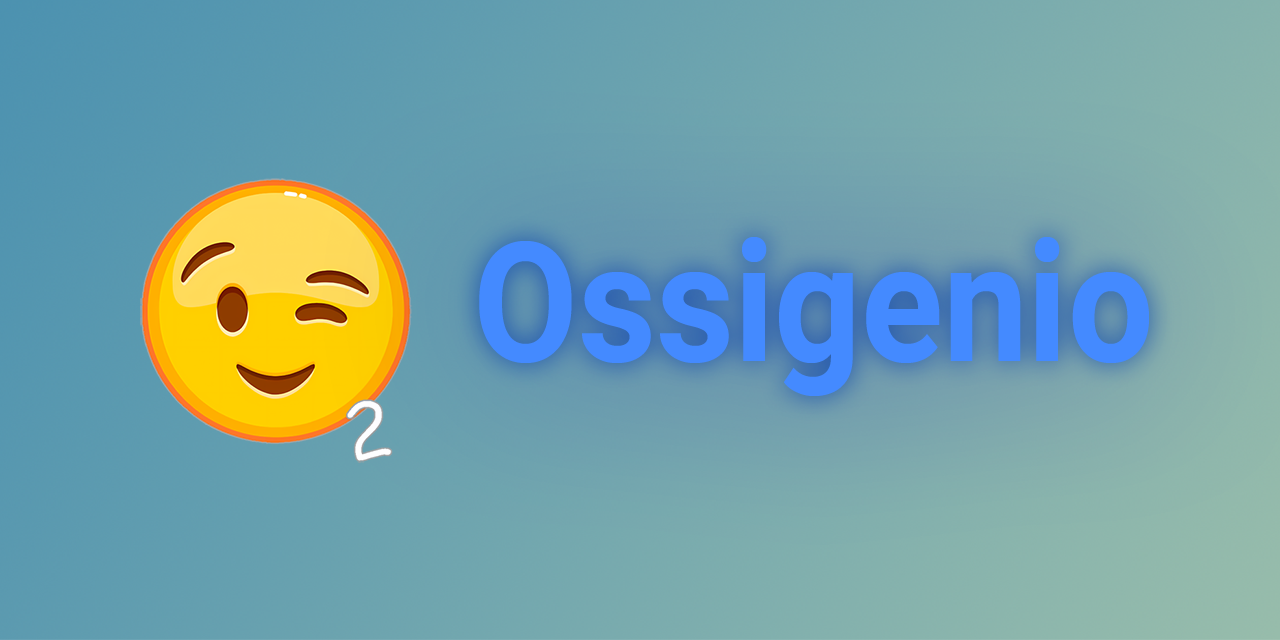
<style>
.page{position:relative;width:1280px;height:640px}
.page>*{position:absolute;margin:0}
.t1{font:165.8px "Roboto-Bold";color:#448aff;scale:0.91 1}
</style>
<div class="page">
<p class="t1" style="left:479px;top:237px;width:670px;height:159px">Ossigenio</p>
</div>
